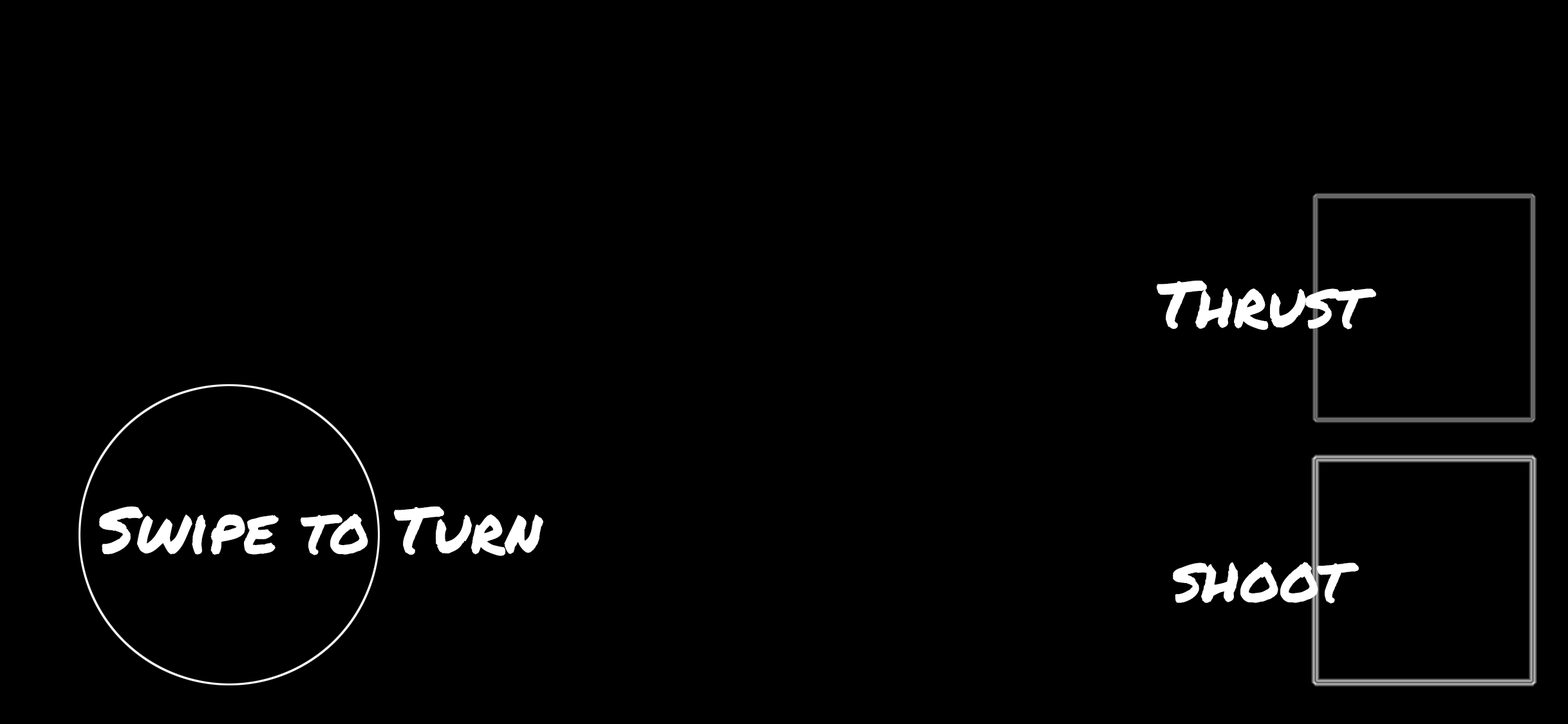
<style>
.page{position:relative;width:1568px;height:724px;background:#000000}
.page>*{position:absolute;margin:0}
.t1{font:64.4px "PermanentMarker-Regular";color:#ffffff}
</style>
<div class="page">
<p class="t1" style="left:1157px;top:281px;width:219px;height:49px">Thrust</p>
<p class="t1" style="left:99px;top:507px;width:444px;height:49px">Swipe to Turn</p>
<p class="t1" style="left:1173px;top:562px;width:186px;height:42px">shoot</p>
</div>
